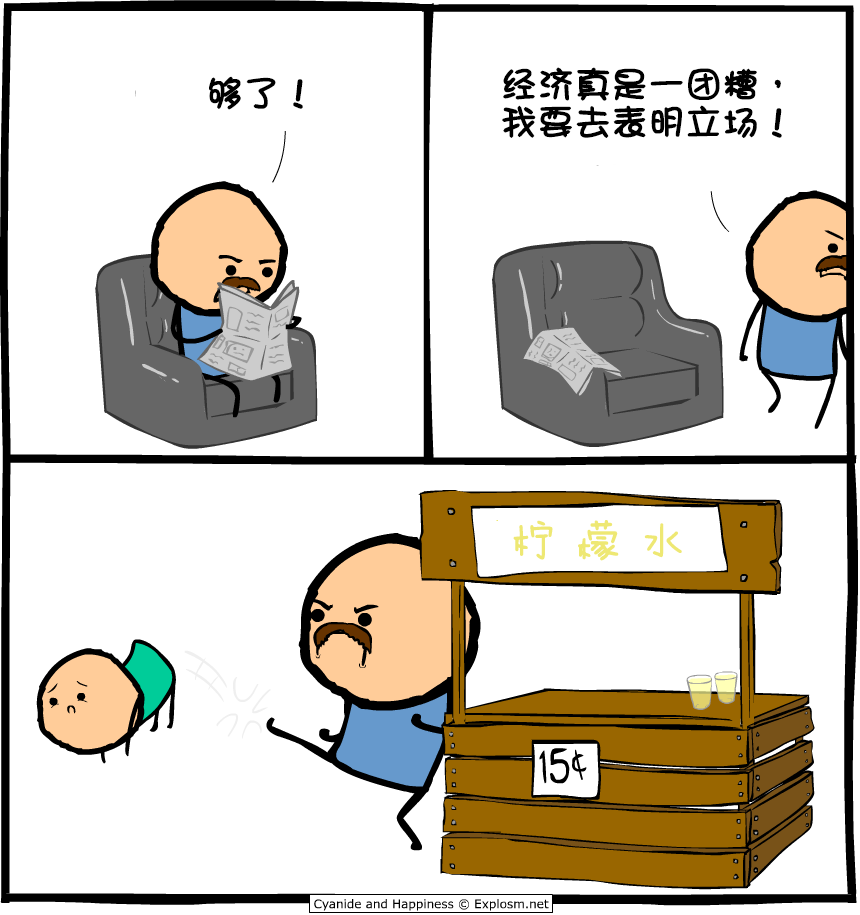
<style>
.page{position:relative;width:860px;height:915px;background:#ffffff}
.page>*{position:absolute;margin:0}
.t1{font:36px "DFGirl";color:#000000;font-weight:bold}
.t2{font:36px/38px "DFGirl";color:#000000;font-weight:bold}
.t3{font:44px "FZMWJW--GB1-0";letter-spacing:0.48em;color:#eee873}
</style>
<div class="page">
<p class="t1" style="left:209px;top:76px;width:94px;height:34px">够了！</p>
<p class="t2" style="left:502px;top:67px;width:280px;height:71px">经济真是一团糟，<br>我要去表明立场！</p>
<p class="t3" style="left:513px;top:520px;width:169px;height:41px">柠檬水</p>
</div>
